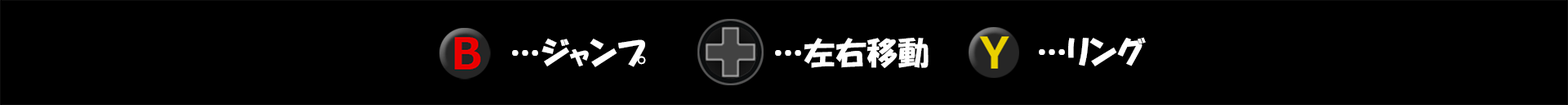
<style>
.page{position:relative;width:1568px;height:105px;background:#000000}
.page>*{position:absolute;margin:0}
.t1{font:31.2px "HGPSoeiKakupoptai";color:#ffffff}
.t2{font:0.6px "HGPSoeiKakupoptai";color:#000000}
</style>
<div class="page">
<p class="t1" style="left:512px;top:38px;width:134px;height:29px">…ジャンプ</p>
<p class="t1" style="left:771px;top:38px;width:158px;height:30px"><span class="t2">s</span>…左右移動</p>
<p class="t1" style="left:1039px;top:37px;width:107px;height:29px">…リング</p>
</div>
